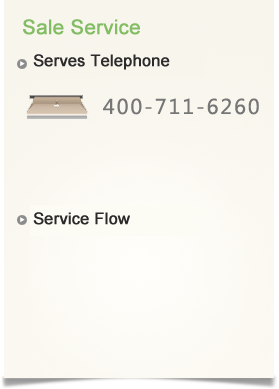
<style>
.page{position:relative;width:279px;height:389px}
.page>*{position:absolute;margin:0}
.t1{font:20px "ArialMT";color:#82bd64;font-weight:bold}
.t2{font:16px "ArialMT";color:#2b2b2b;font-weight:bold}
</style>
<div class="page">
<p class="t1" style="left:23px;top:19px;width:117px;height:16px">Sale Service</p>
<p class="t2" style="left:33px;top:54px;width:137px;height:16px">Serves Telephone</p>
<p class="t2" style="left:33px;top:212px;width:97px;height:13px">Service Flow</p>
</div>
